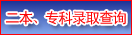
<style>
.page{position:relative;width:132px;height:35px}
.page>*{position:absolute;margin:0}
.t1{font:14.7px "SimHei";letter-spacing:-0.075em;color:#fc0303}
.t2{font:14.7px "SimHei";letter-spacing:-0.1em;color:#fc0303}
</style>
<div class="page">
<p class="t1" style="left:6px;top:11px;width:120px;height:14px">二<span class="t2">本、专</span>科录取查询</p>
</div>
